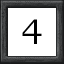
<style>
.page{position:relative;width:64px;height:64px;background:#ffffff}
.page>*{position:absolute;margin:0}
.t1{font:36px "BookmanOldStyle";color:#000000}
</style>
<div class="page">
<p class="t1" style="left:22px;top:19px;width:20px;height:25px">4</p>
</div>
